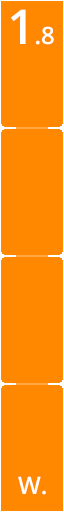
<style>
.page{position:relative;width:64px;height:512px;background:#ff8800}
.page>*{position:absolute;margin:0}
.t1{font:24px "OpenSans-Semibold";color:#ffffff}
.t2{font:48px "OpenSans-Semibold";color:#ffffff}
</style>
<div class="page">
<p class="t1" style="left:11px;top:9px;width:43px;height:36px"><span class="t2">1</span>.8</p>
<p class="t1" style="left:18px;top:476px;width:28px;height:19px">W.</p>
</div>
